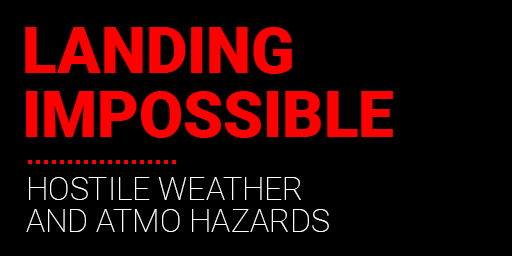
<style>
.page{position:relative;width:512px;height:256px;background:#000000}
.page>*{position:absolute;margin:0}
.t1{font:64px/32px "Roboto-Black";color:#ff0000;text-transform:uppercase}
.t2{font:32px/32px "Roboto-Thin";color:#ffffff;text-transform:uppercase}
</style>
<div class="page">
<p class="t1" style="left:25px;top:27px;width:368px;height:111px">LANDING<br><br>IMPOSSIBLE</p>
<p class="t2" style="left:26px;top:177px;width:303px;height:55px">HOSTILE WEATHER<br>AND ATMO HAZARDS</p>
</div>
